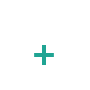
<style>
.page{position:relative;width:90px;height:90px;background:#ffffff}
.page>*{position:absolute;margin:0}
.t1{font:30px "Verdana-Bold";letter-spacing:-0.15em;color:#20a493}
</style>
<div class="page">
<p class="t1" style="left:34px;top:45px;width:20px;height:20px">+</p>
</div>
